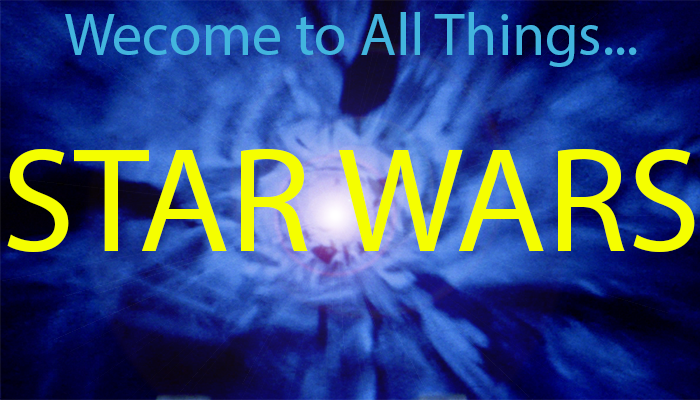
<style>
.page{position:relative;width:700px;height:400px}
.page>*{position:absolute;margin:0}
.t1{font:60px "MyriadPro-Regular";color:#42b4de}
.t2{font:150px "MyriadPro-Regular";color:#f5fe00}
</style>
<div class="page">
<p class="t1" style="left:65px;top:12px;width:572px;height:55px">Wecome to All Things...</p>
<p class="t2" style="left:7px;top:149px;width:688px;height:103px">STAR WARS</p>
</div>
